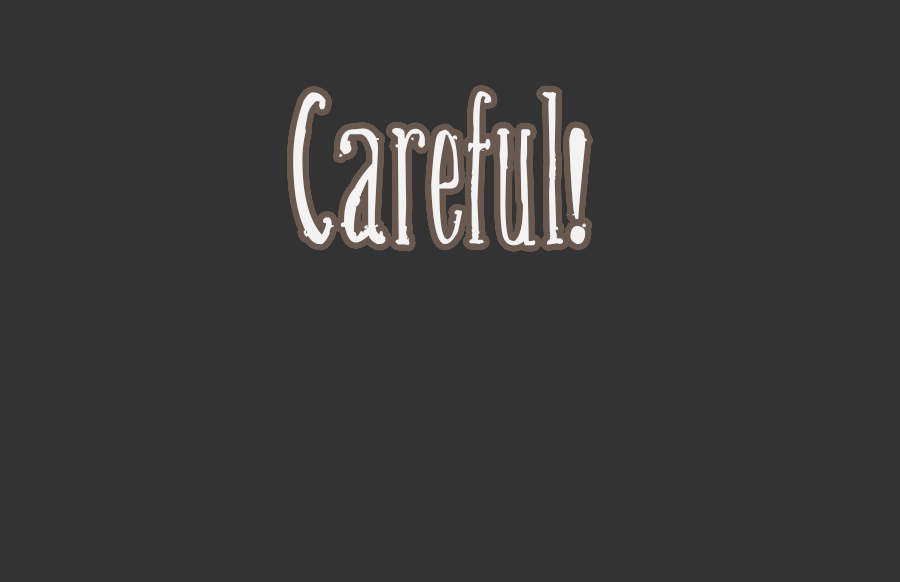
<style>
.page{position:relative;width:900px;height:582px;background:#333333}
.page>*{position:absolute;margin:0}
.t1{font:166.7px "Belisaplumillamanual";color:#f3f3f3}
</style>
<div class="page">
<p class="t1" style="left:293px;top:91px;width:294px;height:155px">Careful!</p>
</div>
